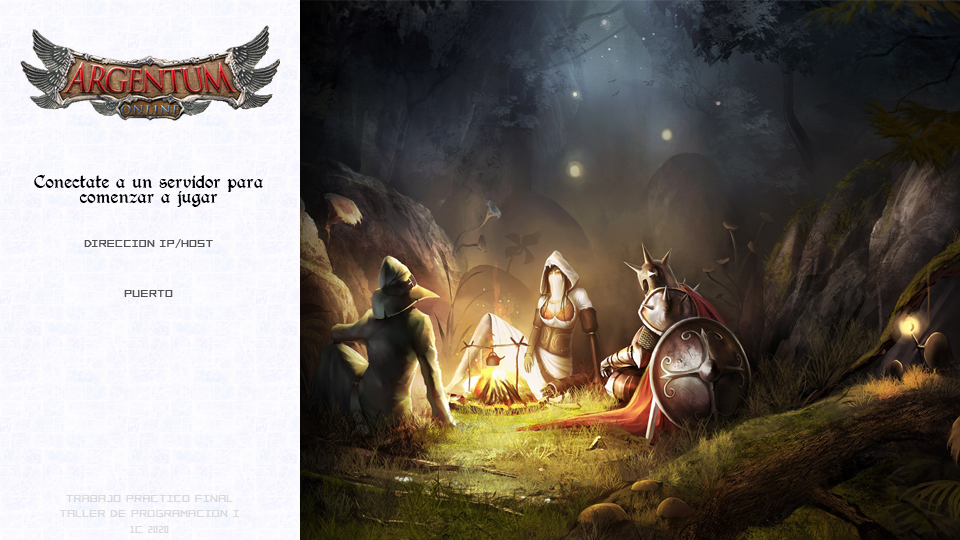
<style>
.page{position:relative;width:960px;height:540px}
.page>*{position:absolute;margin:0}
.t1{font:13px "BerryRotunda-Regular";color:#000000}
.t2{font:13px "FORCED-SQUARE";color:#535353}
.t3{font:13px "FORCED-SQUARE";color:#dbdade}
</style>
<div class="page">
<p class="t1" style="left:34px;top:175px;width:229px;height:32px;text-align:center">Conectate a un servidor para<br>comenzar a jugar</p>
<p class="t2" style="left:84px;top:239px;width:129px;height:9px">DIRECCION IP/HOST</p>
<p class="t2" style="left:124px;top:290px;width:49px;height:7px">PUERTO</p>
<p class="t3" style="left:59px;top:495px;width:180px;height:38px;text-align:center">TRABAJO PRACTICO FINAL<br>TALLER DE PROGRAMACION I<br>1C 2020</p>
</div>
